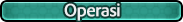
<style>
.page{position:relative;width:183px;height:22px}
.page>*{position:absolute;margin:0}
.t1{font:18px "AdobeClean-Regular";letter-spacing:-0.04em;color:#edeff1;font-weight:bold}
</style>
<div class="page">
<p class="t1" style="left:64px;top:3px;width:56px;height:18px">Operasi</p>
</div>
